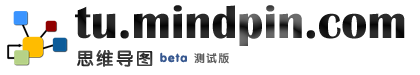
<style>
.page{position:relative;width:420px;height:75px;background:#ffffff}
.page>*{position:absolute;margin:0}
.t1{font:48px "BritannicBold"}
.t2{font:18px "FZY4JW--GB1-0";letter-spacing:0.1em;color:#373737}
.t3{font:12px "FZY4JW--GB1-0";letter-spacing:0.1em;color:#375890}
</style>
<div class="page">
<p class="t1" style="left:75px;top:5px;width:330px;height:41px">tu.mindpin.com</p>
<p class="t2" style="left:77px;top:50px;width:76px;height:17px">思维导图</p>
<p class="t3" style="left:160px;top:52px;width:27px;height:11px">beta</p>
</div>
